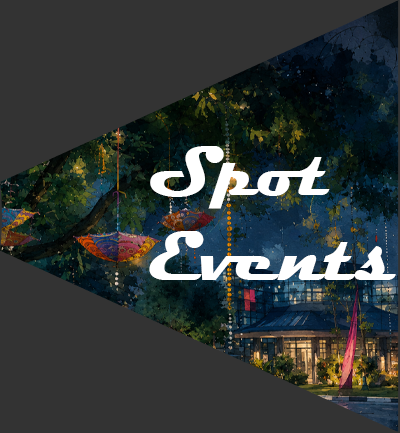
<style>
.page{position:relative;width:400px;height:433px;background:#333333}
.page>*{position:absolute;margin:0}
.t1{font:70.7px "Magneto-Bold";color:#ffffff}
</style>
<div class="page">
<p class="t1" style="left:149px;top:146px;width:247px;height:134px">Spot<br>Events</p>
</div>
